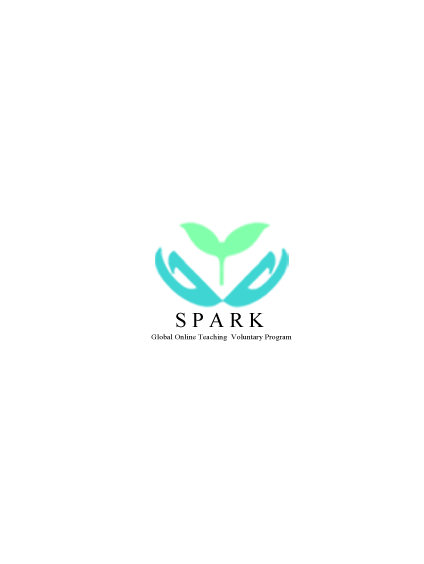
<style>
.page{position:relative;width:424px;height:564px;background:#ffffff}
.page>*{position:absolute;margin:0}
.t1{font:21.1px "TimesNewRomanPSMT";color:#000000}
.t2{font:7px "TimesNewRomanPSMT";scale:1.12 1}
</style>
<div class="page">
<p class="t1" style="left:176px;top:312px;width:88px;height:16px">S P A R K</p>
<p class="t2" style="left:151px;top:334px;width:141px;height:7px">Global Online Teaching  Voluntary Program</p>
</div>
